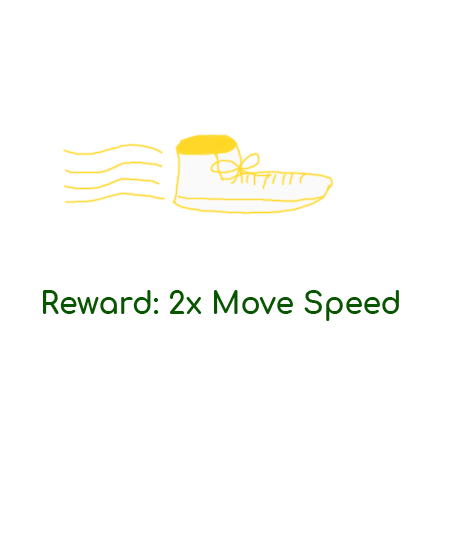
<style>
.page{position:relative;width:450px;height:534px;background:#ffffff}
.page>*{position:absolute;margin:0}
.t1{font:30px "Comfortaa-Bold";color:#085500}
</style>
<div class="page">
<p class="t1" style="left:43px;top:290px;width:356px;height:31px">Reward: 2x Move Speed</p>
</div>
